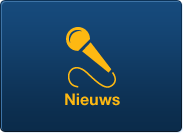
<style>
.page{position:relative;width:183px;height:133px}
.page>*{position:absolute;margin:0}
.t1{font:16px "HelveticaNeueLTStd-Bd";color:#fdb812}
</style>
<div class="page">
<p class="t1" style="left:65px;top:93px;width:55px;height:13px">Nieuws</p>
</div>
